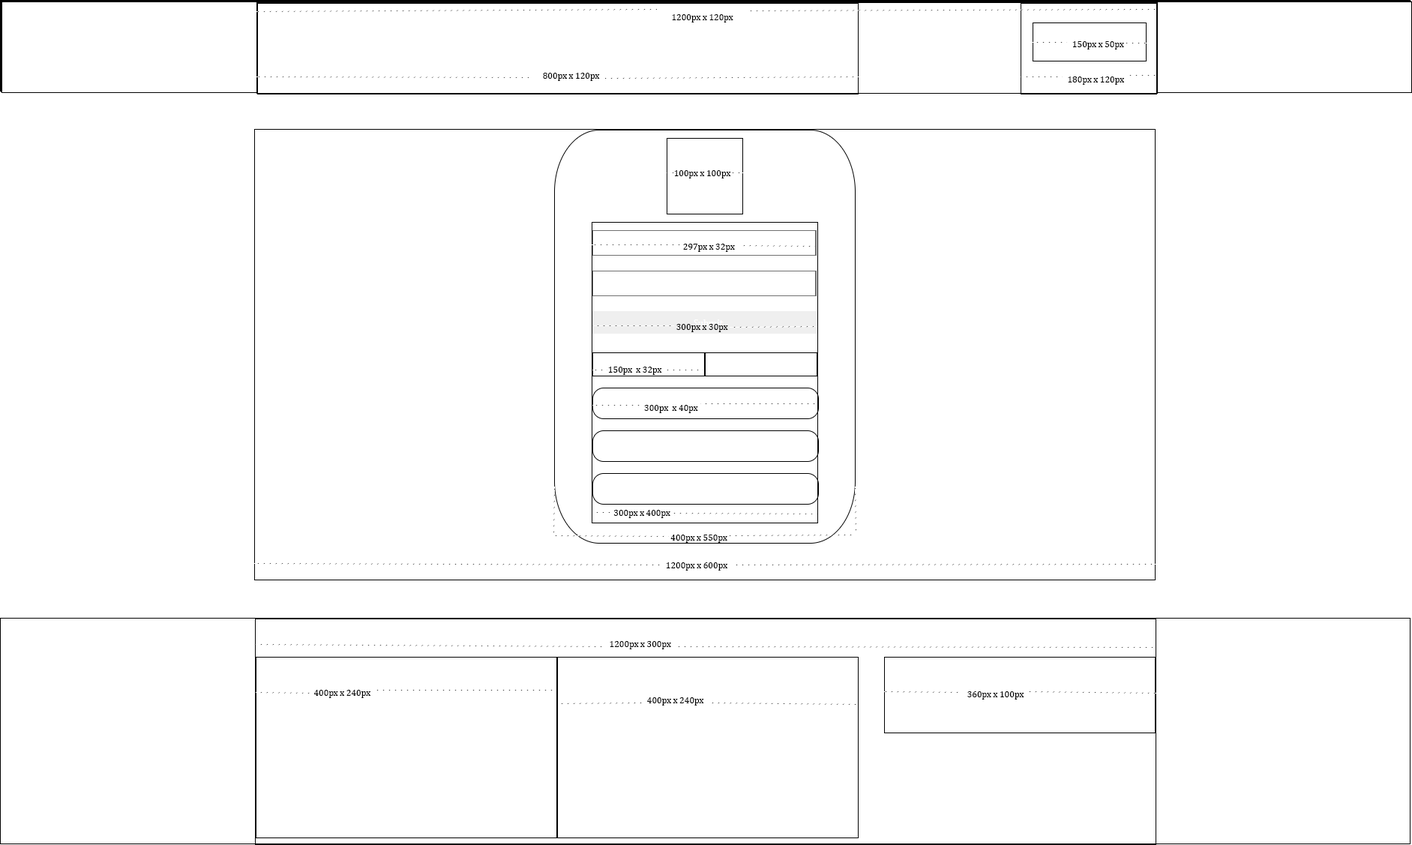
<style>
.page{position:relative;width:1412px;height:845px;background:#ffffff}
.page>*{position:absolute;margin:0}
.t1{font:9px "CambriaMath";color:#000000}
</style>
<div class="page">
<p class="t1" style="left:672px;top:14px;width:62px;height:8px">1200px x 120px</p>
<p class="t1" style="left:1072px;top:41px;width:52px;height:9px">150px x 50px</p>
<p class="t1" style="left:543px;top:73px;width:57px;height:8px">800px x 120px</p>
<p class="t1" style="left:1068px;top:76px;width:56px;height:9px">180px x 120px</p>
<p class="t1" style="left:674px;top:170px;width:57px;height:8px">100px x 100px</p>
<p class="t1" style="left:683px;top:244px;width:52px;height:8px">297px x 32px</p>
<p class="t1" style="left:676px;top:324px;width:52px;height:8px">300px x 30px</p>
<p class="t1" style="left:608px;top:367px;width:54px;height:8px">150px  x 32px</p>
<p class="t1" style="left:644px;top:405px;width:54px;height:8px">300px  x 40px</p>
<p class="t1" style="left:614px;top:510px;width:56px;height:8px">300px x 400px</p>
<p class="t1" style="left:670px;top:535px;width:58px;height:8px">400px x 550px</p>
<p class="t1" style="left:666px;top:562px;width:62px;height:9px">1200px x 600px</p>
<p class="t1" style="left:610px;top:641px;width:61px;height:9px">1200px x 300px</p>
<p class="t1" style="left:314px;top:690px;width:56px;height:8px">400px x 240px</p>
<p class="t1" style="left:647px;top:698px;width:57px;height:8px">400px x 240px</p>
<p class="t1" style="left:968px;top:692px;width:56px;height:8px">360px x 100px</p>
</div>
